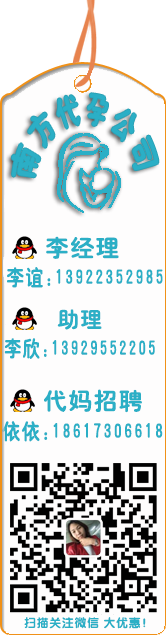
<style>
.page{position:relative;width:167px;height:635px;background:#fefdfd}
.page>*{position:absolute;margin:0}
.t1{font:22px "HYe4gj";letter-spacing:0.25em;color:#2bafc6;scale:0.64 1}
.t2{font:24px "HYe4gj";letter-spacing:0.05em;color:#2bafc6}
.t3{font:22px "HYe4gj";letter-spacing:0.05em;color:#2bafc6;scale:0.83 1}
.t4{font:22px "HYe4gj";letter-spacing:0.05em;color:#2bafc6}
.t5{font:22px "HYe4gj";letter-spacing:0.05em;color:#2bafc6;scale:0.8 1}
.t6{font:22px "HYe4gj";letter-spacing:0.05em;color:#2bafc6;scale:0.85 1}
.t7{font:12px "FZY4K--GBK1-0";letter-spacing:0.05em;color:#2bafc6}
</style>
<div class="page">
<p class="t1" style="left:12px;top:93px;width:147px;height:85px">南方代孕公司</p>
<p class="t2" style="left:46px;top:236px;width:73px;height:23px">李经理</p>
<p class="t3" style="left:7px;top:267px;width:156px;height:21px">李谊:13922352985</p>
<p class="t4" style="left:57px;top:309px;width:45px;height:21px">助理</p>
<p class="t5" style="left:4px;top:338px;width:151px;height:21px">李欣:13929552205</p>
<p class="t2" style="left:44px;top:389px;width:98px;height:24px">代妈招聘</p>
<p class="t6" style="left:2px;top:421px;width:161px;height:21px">依依:18617306618</p>
<p class="t7" style="left:24px;top:617px;width:122px;height:12px">扫描关注微信 大优惠！</p>
</div>
